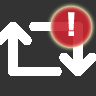
<style>
.page{position:relative;width:96px;height:96px;background:#333333}
.page>*{position:absolute;margin:0}
.t1{font:30px "Impact";color:#ffffff}
</style>
<div class="page">
<p class="t1" style="left:68px;top:12px;width:7px;height:24px">!</p>
</div>
